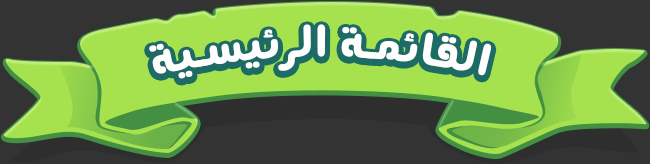
<style>
.page{position:relative;width:650px;height:164px;background:#a5e24d}
.page>*{position:absolute;margin:0}
.t1{font:48px "ANegaar-Bold";letter-spacing:0.05em;color:#ffffff}
</style>
<div class="page">
<p class="t1" style="left:149px;top:24px;width:343px;height:55px">القائمة الرئيسية</p>
</div>
